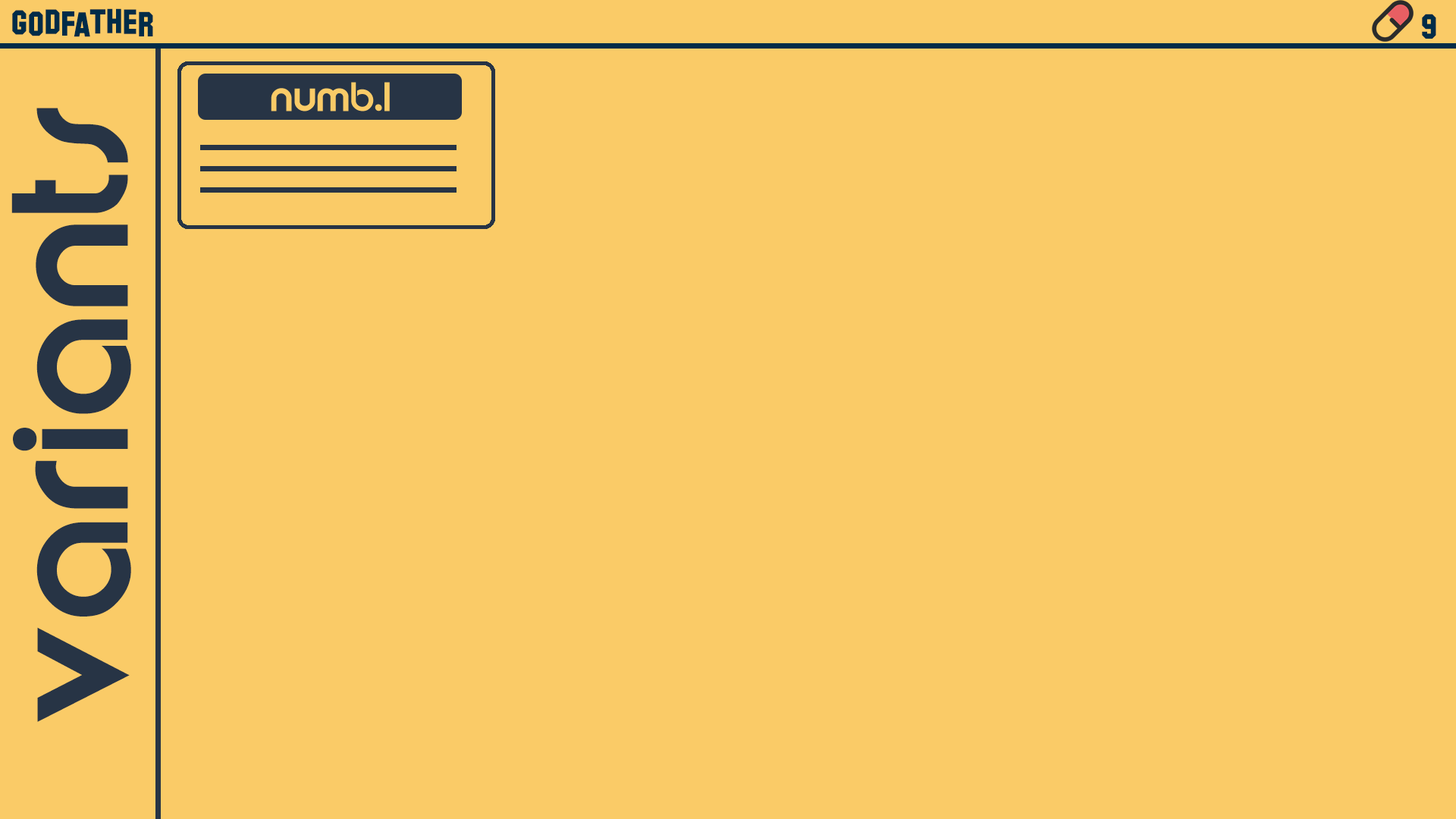
<style>
.page{position:relative;width:1456px;height:819px;background:#facb67}
.page>*{position:absolute;margin:0}
.t1{font:34.7px "HollywoodHills";color:#002c48}
.t2{font:138.7px "Brandish";color:#273445}
</style>
<div class="page">
<p class="t1" style="left:12px;top:8px;width:141px;height:29px">godfather</p>
<p class="t1" style="left:1422px;top:14px;width:14px;height:25px">9</p>
<p class="t2" style="left:11px;top:108px;width:120px;height:614px;rotate:-90deg">variants</p>
</div>
